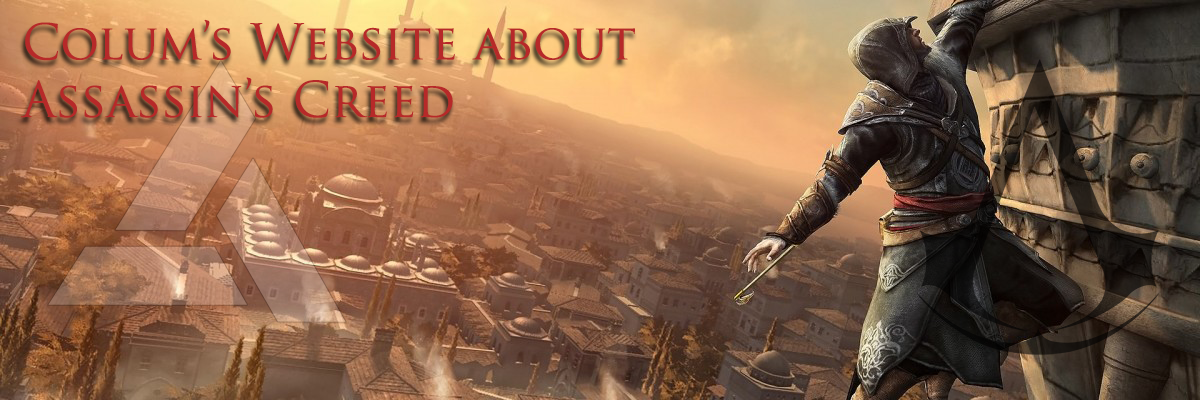
<style>
.page{position:relative;width:1200px;height:400px}
.page>*{position:absolute;margin:0}
.t1{font:48px "TrajanPro-Regular";color:#b72929}
</style>
<div class="page">
<p class="t1" style="left:20px;top:19px;width:615px;height:99px">Colum’s Website about <br>Assassin’s Creed</p>
</div>
